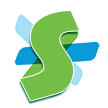
<style>
.page{position:relative;width:108px;height:108px;background:#ffffff}
.page>*{position:absolute;margin:0}
.t1{font:113.3px "THEMINION";color:#73be46}
</style>
<div class="page">
<p class="t1" style="left:20px;top:11px;width:59px;height:90px">S</p>
</div>
